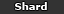
<style>
.page{position:relative;width:64px;height:14px;background:#333333}
.page>*{position:absolute;margin:0}
.t1{font:10px "Verdana-Bold";color:#ffffff}
</style>
<div class="page">
<p class="t1" style="left:14px;top:2px;width:33px;height:8px">Shard</p>
</div>
